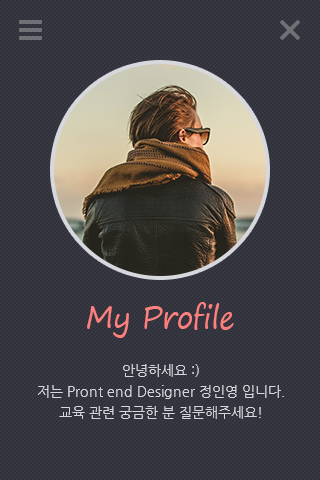
<style>
.page{position:relative;width:320px;height:480px;background:#32323c}
.page>*{position:absolute;margin:0}
.t1{font:30px "SegoePrint";letter-spacing:-0.025em;color:#fc807e}
.t2{font:14px "NanumGothic";color:#d7d7de}
</style>
<div class="page">
<p class="t1" style="left:87px;top:302px;width:147px;height:36px">My Profile</p>
<p class="t2" style="left:38px;top:364px;width:246px;height:55px;text-align:center">안녕하세요 :)<br>저는 Pront end Designer 정인영 입니다.<br>교육 관련 궁금한 분 질문해주세요!</p>
</div>
